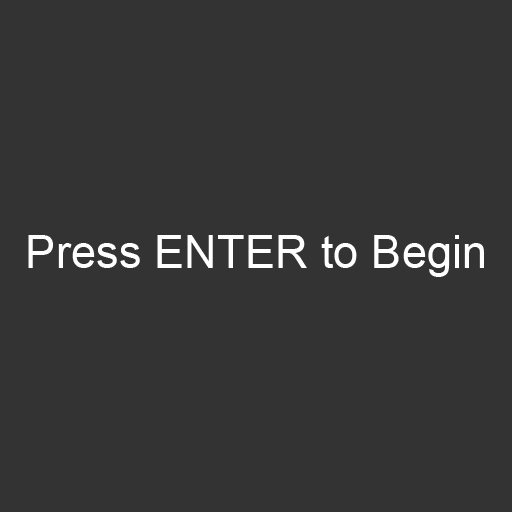
<style>
.page{position:relative;width:512px;height:512px;background:#333333}
.page>*{position:absolute;margin:0}
.t1{font:45.7px "ArialMT";color:#ffffff}
</style>
<div class="page">
<p class="t1" style="left:28px;top:235px;width:456px;height:42px">Press ENTER to Begin</p>
</div>
